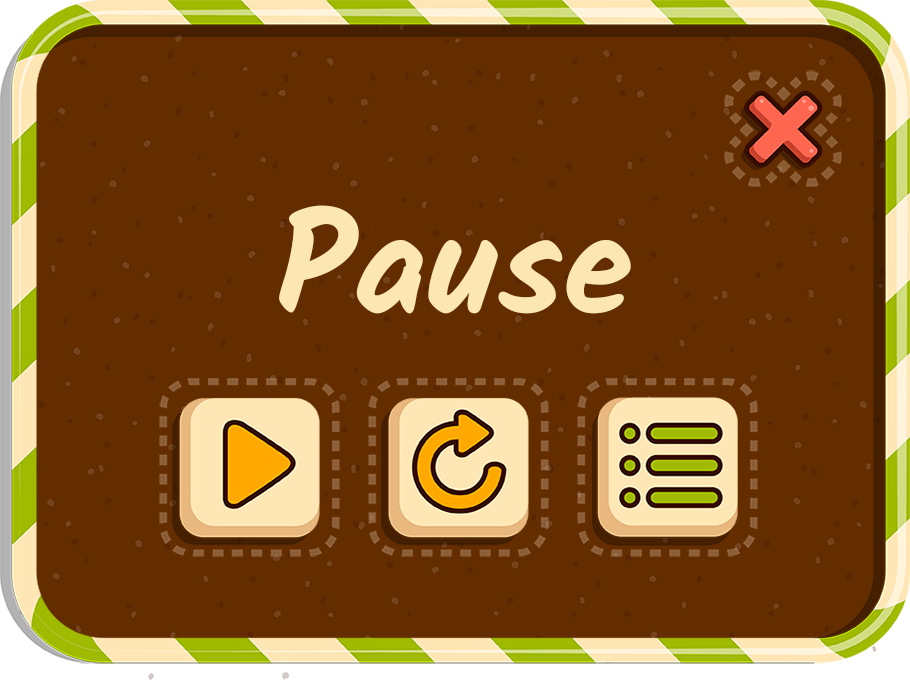
<style>
.page{position:relative;width:910px;height:680px;background:#632d00}
.page>*{position:absolute;margin:0}
.t1{font:141.6px "Kalam-Bold";color:#fce6b2}
</style>
<div class="page">
<p class="t1" style="left:279px;top:205px;width:352px;height:109px">Pause</p>
</div>
